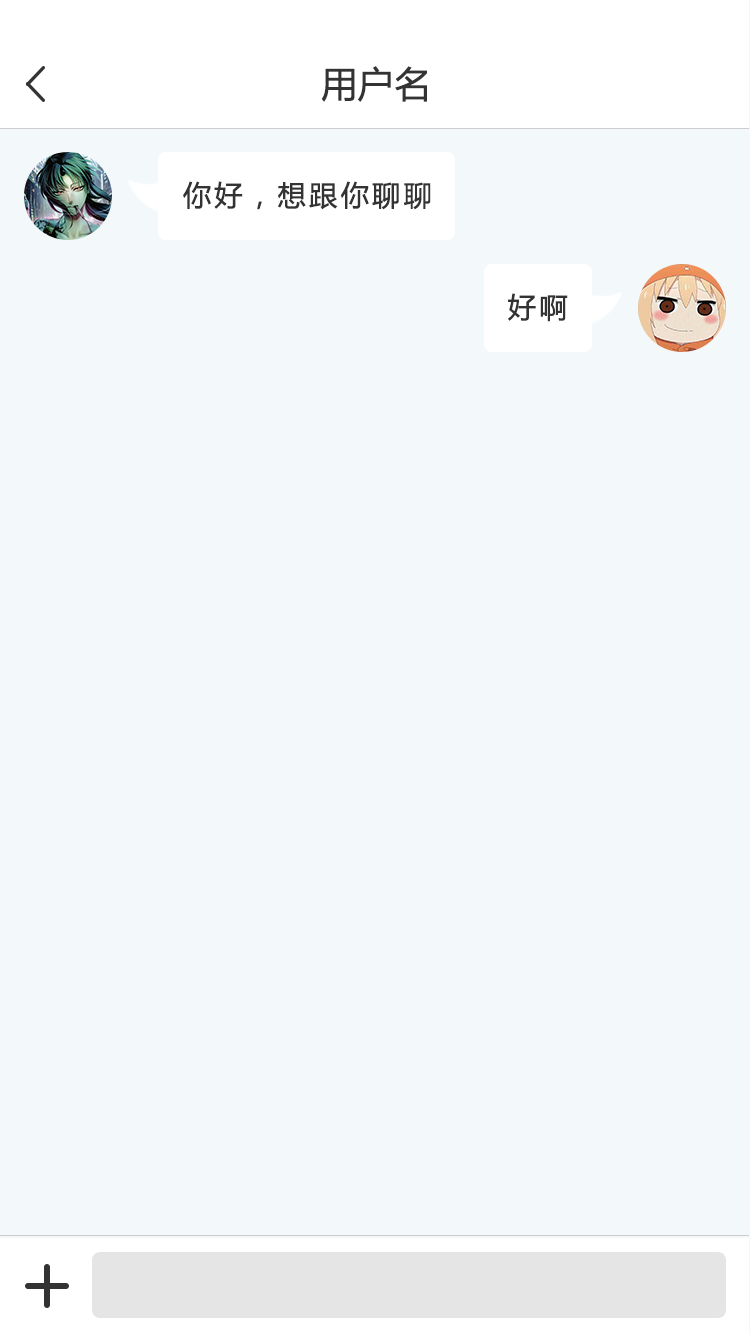
<style>
.page{position:relative;width:750px;height:1334px;background:#f3f8fb}
.page>*{position:absolute;margin:0}
.t1{font:36px "MicrosoftYaHei";color:#333333;font-weight:bold}
.t2{font:28px "MicrosoftYaHei";letter-spacing:0.1em;color:#333333;font-weight:bold}
</style>
<div class="page">
<p class="t1" style="left:321px;top:66px;width:106px;height:36px">用户名</p>
<p class="t2" style="left:183px;top:181px;width:248px;height:29px">你好，想跟你聊聊</p>
<p class="t2" style="left:508px;top:293px;width:60px;height:29px">好啊</p>
</div>
